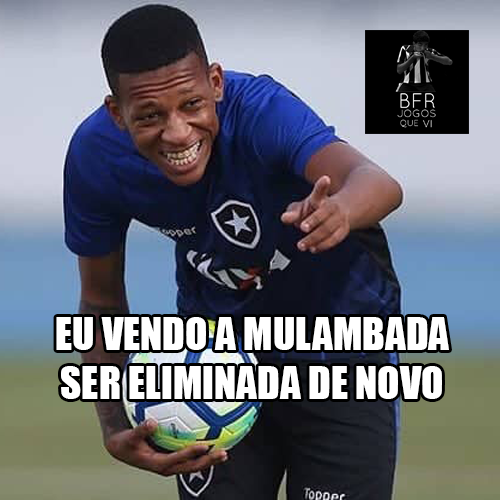
<style>
.page{position:relative;width:500px;height:500px}
.page>*{position:absolute;margin:0}
.t1{font:41.6px "Impact";color:#ffffff}
</style>
<div class="page">
<p class="t1" style="left:56px;top:317px;width:393px;height:82px;text-align:center">EU VENDO A MULAMBADA <br>SER ELIMINADA DE NOVO</p>
</div>
